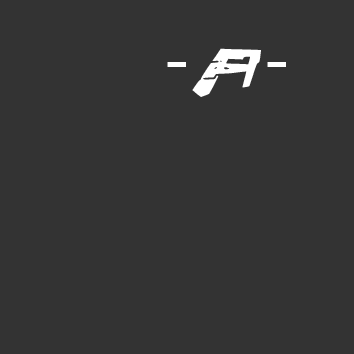
<style>
.page{position:relative;width:354px;height:354px;background:#333333}
.page>*{position:absolute;margin:0}
.t1{font:75px "MyriadPro-Regular";color:#ffffff}
.t2{font:75px "Cyberpunk-Regular";color:#ffffff}
</style>
<div class="page">
<p class="t1" style="left:167px;top:48px;width:119px;height:49px">-<span class="t2">А</span>-</p>
</div>
